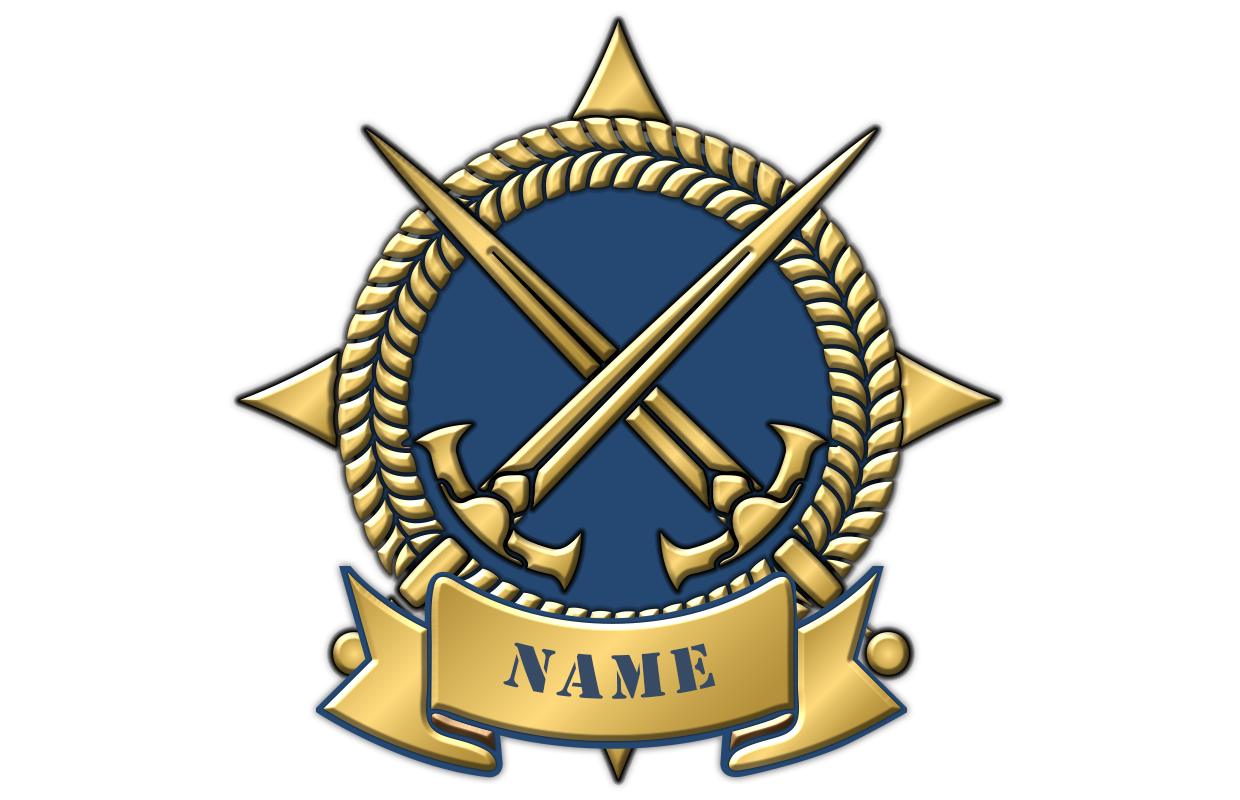
<style>
.page{position:relative;width:1240px;height:800px;background:#ffffff}
.page>*{position:absolute;margin:0}
.t1{font:65px "Stencil";letter-spacing:0.08em;color:#384b65}
</style>
<div class="page">
<p class="t1" style="left:503px;top:642px;width:213px;height:57px">NAME</p>
</div>
